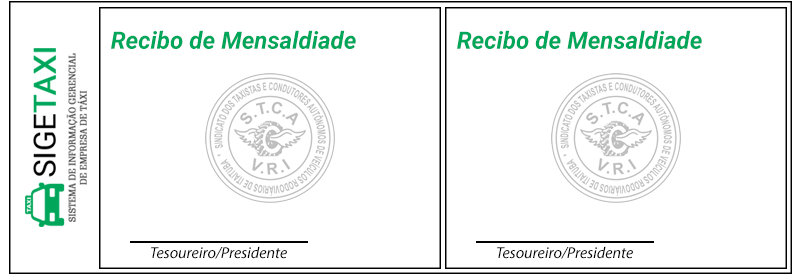
<style>
.page{position:relative;width:800px;height:277px;background:#ffffff}
.page>*{position:absolute;margin:0}
.t1{font:24px "Roboto-BoldItalic";color:#00a65a}
.t2{font:16px "MyriadPro-It";color:#000000}
</style>
<div class="page">
<p class="t1" style="left:111px;top:30px;width:245px;height:19px">Recibo de Mensaldiade</p>
<p class="t1" style="left:457px;top:30px;width:245px;height:19px">Recibo de Mensaldiade</p>
<p class="t2" style="left:151px;top:246px;width:136px;height:13px">Tesoureiro/Presidente</p>
<p class="t2" style="left:497px;top:246px;width:136px;height:13px">Tesoureiro/Presidente</p>
</div>
